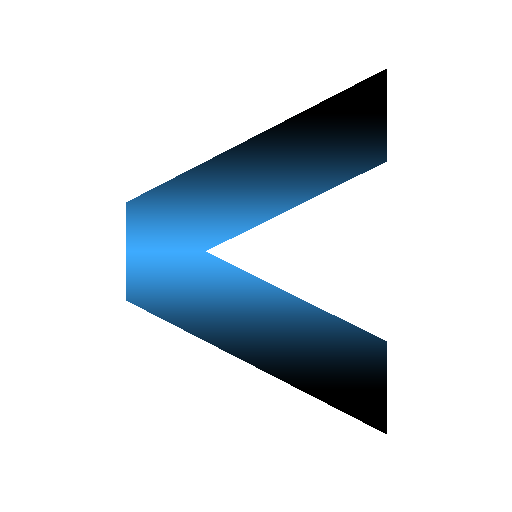
<style>
.page{position:relative;width:512px;height:512px;background:#ffffff}
.page>*{position:absolute;margin:0}
.t1{font:744.1px "MontserratRoman-Bold";letter-spacing:-0.02em;font-weight:bold;scale:0.74 1}
</style>
<div class="page">
<p class="t1" style="left:126px;top:69px;width:261px;height:365px">&lt;</p>
</div>
